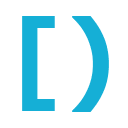
<style>
.page{position:relative;width:128px;height:128px;background:#ffffff}
.page>*{position:absolute;margin:0}
.t1{font:100px "Verdana-Bold";color:#15afd6}
</style>
<div class="page">
<p class="t1" style="left:22px;top:16px;width:87px;height:96px">[)</p>
</div>
